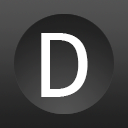
<style>
.page{position:relative;width:128px;height:128px}
.page>*{position:absolute;margin:0}
.t1{font:100px "Consolas";color:#ffffff}
</style>
<div class="page">
<p class="t1" style="left:41px;top:33px;width:47px;height:64px">D</p>
</div>
